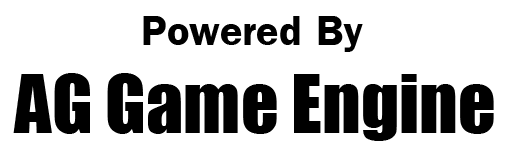
<style>
.page{position:relative;width:512px;height:162px;background:#ffffff}
.page>*{position:absolute;margin:0}
.t1{font:66px "FreesiaUPCBold";color:#000000}
.t2{font:74px "Impact";color:#000000}
</style>
<div class="page">
<p class="t1" style="left:143px;top:16px;width:220px;height:36px">Powered By</p>
<p class="t2" style="left:13px;top:73px;width:481px;height:68px">AG Game Engine</p>
</div>
